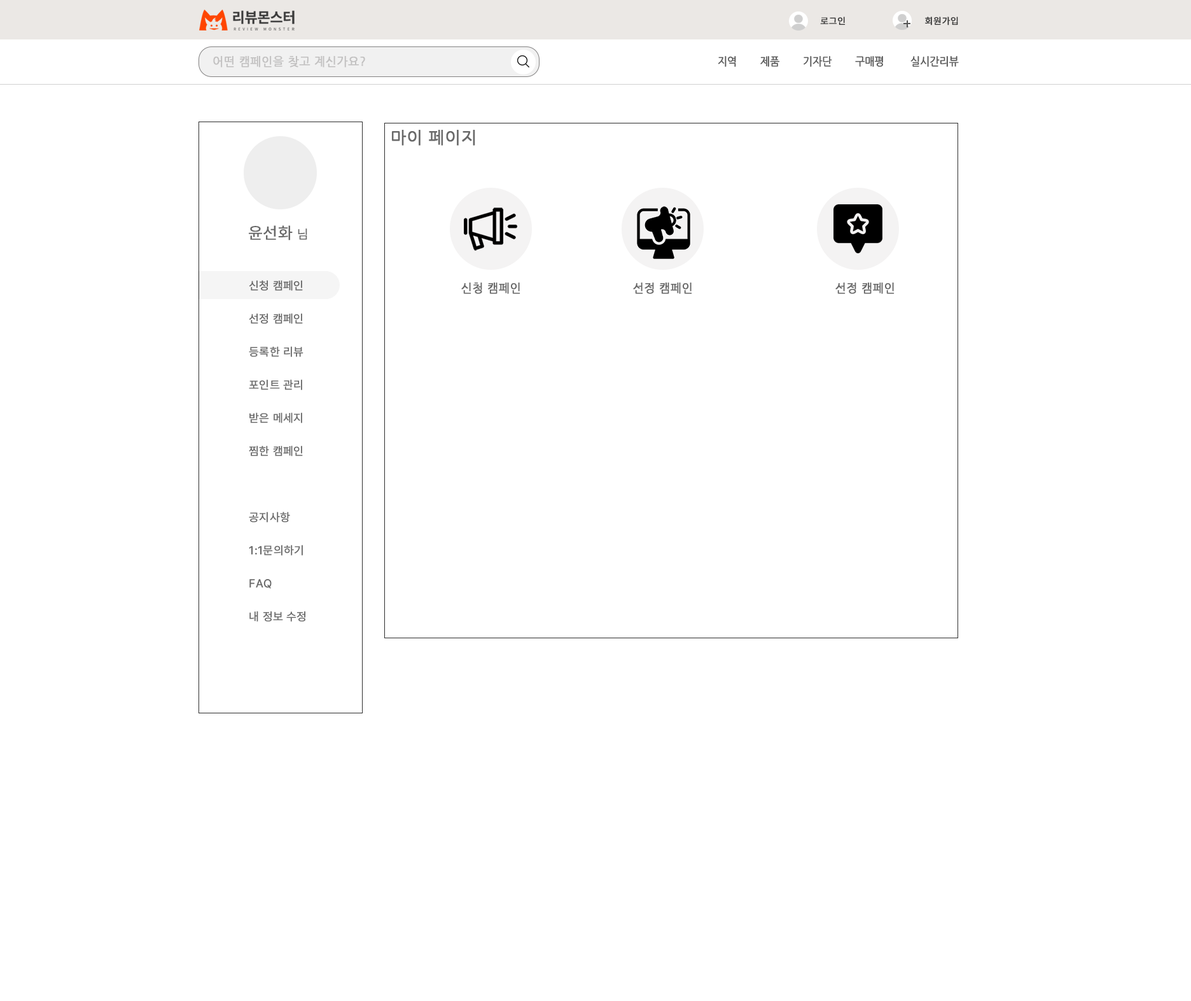
<style>
.page{position:relative;width:1191px;height:1001px;background:#ffffff}
.page>*{position:absolute;margin:0}
.t1{font:8.9px "NotoSansKR-Regular";letter-spacing:0.02em;color:#333333;font-weight:bold}
.t2{font:11.5px "NanumGothic";letter-spacing:0.02em;color:#c2c1c1;font-weight:bold}
.t3{font:11.2px "NanumGothic";letter-spacing:-0.02em;color:#575757;font-weight:bold;scale:0.91 1}
.t4{font:16.5px "NanumGothic";letter-spacing:0.02em;color:#696969;font-weight:bold}
.t5{font:16.5px "Pretendard-Regular";letter-spacing:0.02em;color:#696969;font-weight:bold}
.t6{font:12.7px "Pretendard-Regular";letter-spacing:0.02em;color:#696969;font-weight:bold}
.t7{font:11.5px/33.1px "Pretendard-Regular";letter-spacing:0.02em;color:#696969;font-weight:bold}
.t8{font:11.5px "NanumGothic";letter-spacing:0.02em;color:#696969;font-weight:bold}
</style>
<div class="page">
<p class="t1" style="left:820px;top:17px;width:26px;height:8px">로그인</p>
<p class="t1" style="left:925px;top:17px;width:33px;height:8px">회원가입</p>
<p class="t2" style="left:213px;top:55px;width:152px;height:12px">어떤 캠페인을 찾고 계신가요?</p>
<p class="t3" style="left:718px;top:56px;width:241px;height:11px">지역        제품        기자단        구매평         실시간리뷰</p>
<p class="t4" style="left:391px;top:130px;width:84px;height:16px">마이 페이지</p>
<p class="t5" style="left:249px;top:225px;width:58px;height:16px">윤선화 <span class="t6">님</span></p>
<p class="t7" style="left:249px;top:280px;width:56px;height:342px">신청 캠페인<br>선정 캠페인<br>등록한 리뷰<br>포인트 관리<br>받은 메세지<br>찜한 캠페인<br><br>공지사항<br>1:1문의하기<br>FAQ<br>내 정보 수정</p>
<p class="t8" style="left:461px;top:283px;width:60px;height:11px">신청 캠페인</p>
<p class="t8" style="left:633px;top:283px;width:59px;height:11px">선정 캠페인</p>
<p class="t8" style="left:836px;top:283px;width:59px;height:11px">선정 캠페인</p>
</div>
